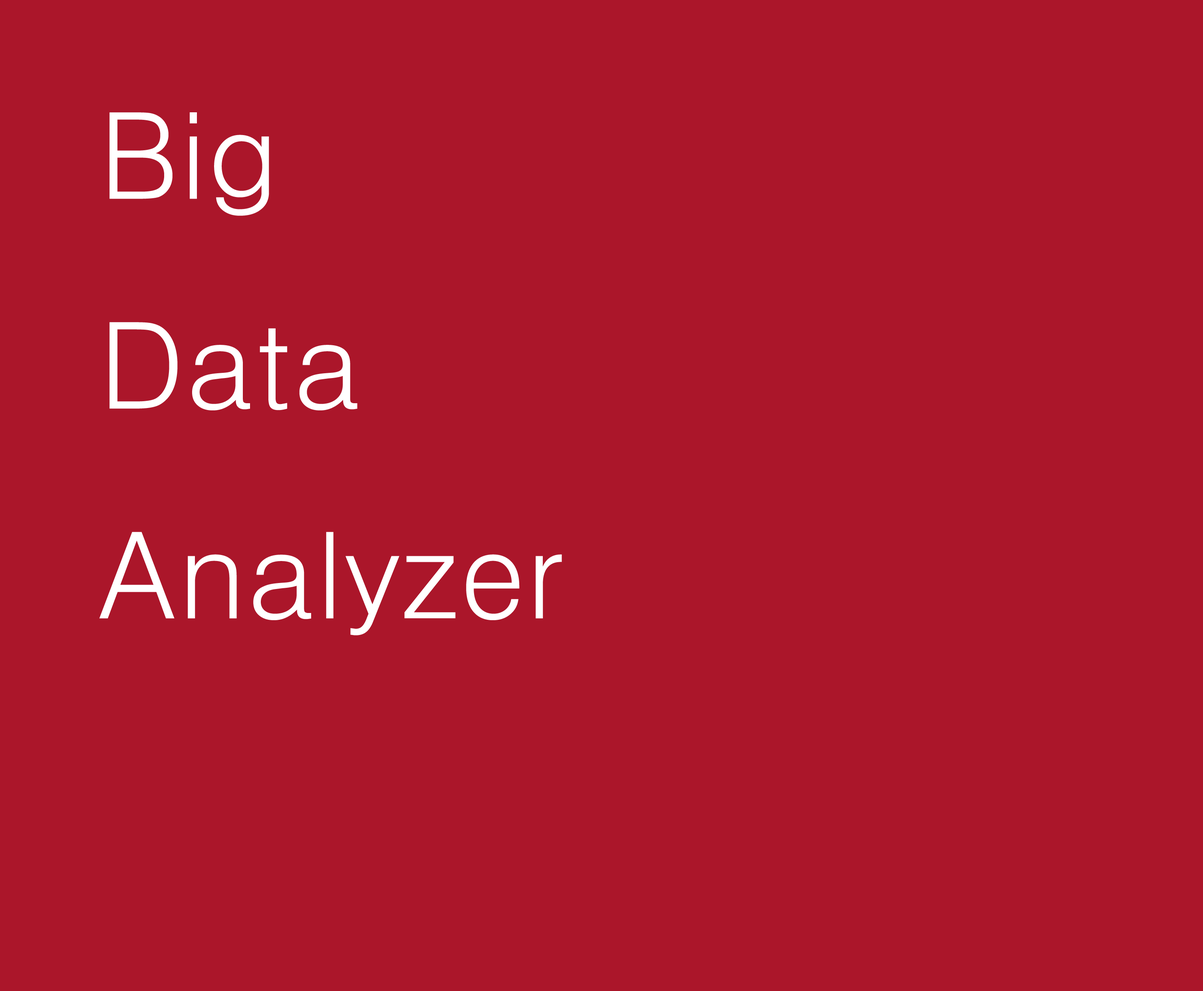
<style>
.page{position:relative;width:1203px;height:991px;background:#ab162a}
.page>*{position:absolute;margin:0}
.t1{font:119.9px "Dotum";color:#ffffff}
</style>
<div class="page">
<p class="t1" style="left:99px;top:112px;width:463px;height:523px">Big<br>Data<br>Analyzer</p>
</div>
